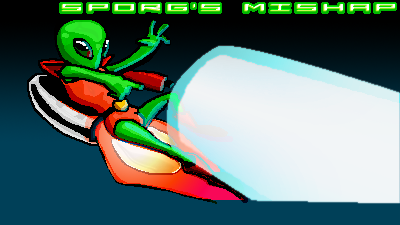
<style>
.page{position:relative;width:400px;height:225px}
.page>*{position:absolute;margin:0}
.t1{font:24px "DarkEmpire";letter-spacing:0.2em}
.t2{font:24px "DarkEmpire";letter-spacing:0.2em;color:#ffffff}
</style>
<div class="page">
<p class="t1" style="left:61px;top:4px;width:334px;height:8px">SPORG's MISHAP</p>
<p class="t2" style="left:62px;top:3px;width:334px;height:8px">SPORG'S MISHAP</p>
</div>
